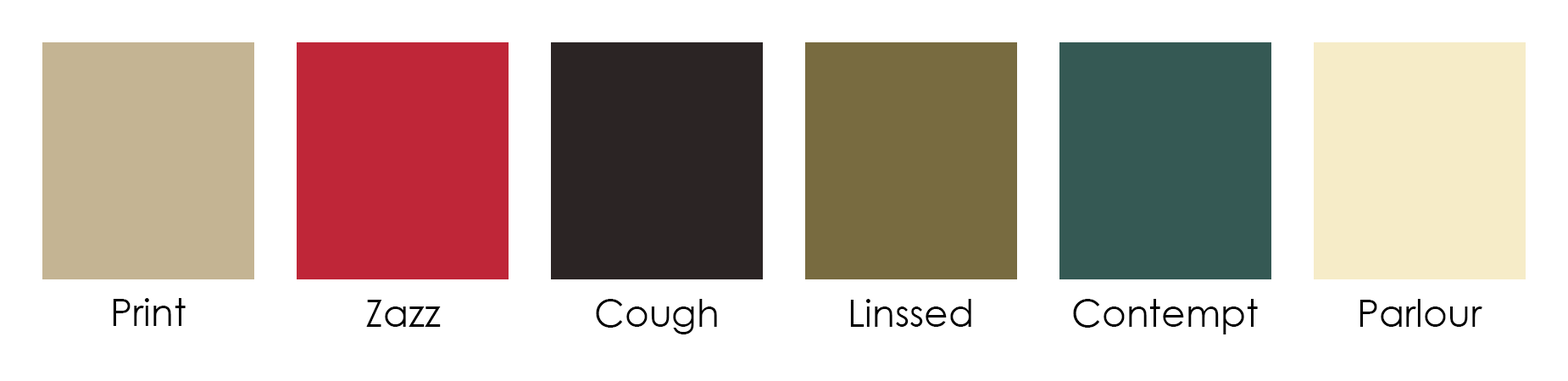
<style>
.page{position:relative;width:1568px;height:381px;background:#ffffff}
.page>*{position:absolute;margin:0}
.t1{font:37.8px "CenturyGothic";color:#000000}
</style>
<div class="page">
<p class="t1" style="left:113px;top:298px;width:73px;height:28px">Print</p>
<p class="t1" style="left:366px;top:300px;width:75px;height:27px">Zazz</p>
<p class="t1" style="left:596px;top:299px;width:121px;height:36px">Cough</p>
<p class="t1" style="left:850px;top:299px;width:121px;height:28px">Linssed</p>
<p class="t1" style="left:1073px;top:299px;width:185px;height:36px">Contempt</p>
<p class="t1" style="left:1359px;top:299px;width:123px;height:28px">Parlour</p>
</div>
